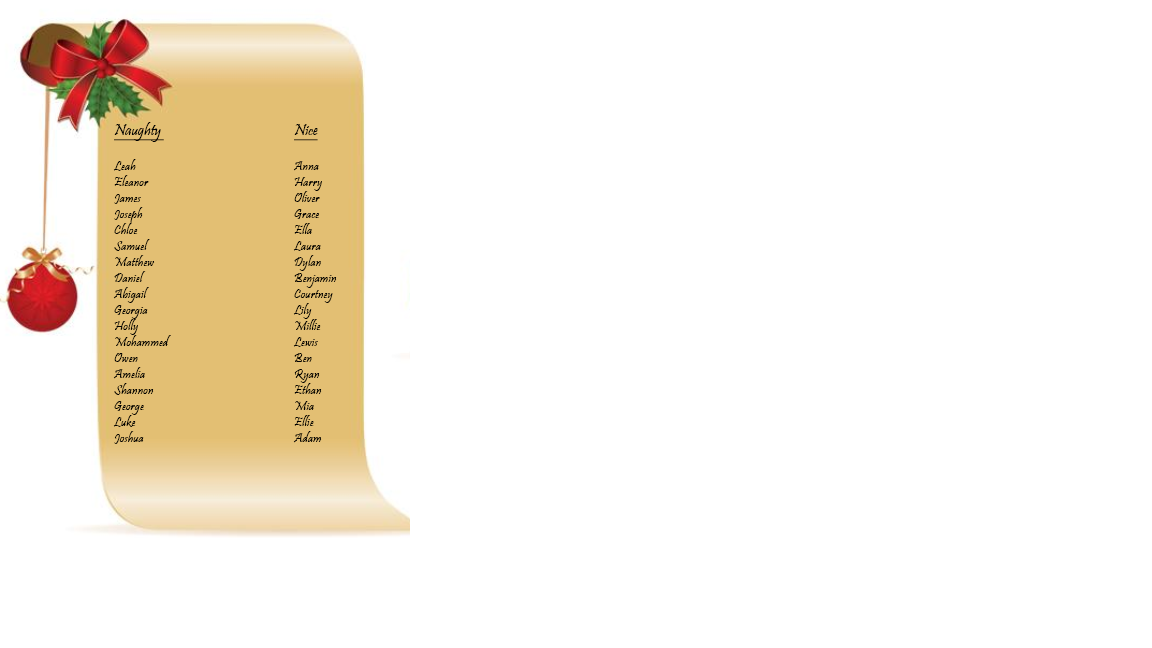
<style>
.page{position:relative;width:1152px;height:648px;background:#ffffff}
.page>*{position:absolute;margin:0}
.t1{font:13.3px "Pristina-Regular";color:#000000}
.t2{font:12px "Pristina-Regular";color:#000000;text-decoration:underline}
</style>
<div class="page">
<p class="t1" style="left:113px;top:122px;width:224px;height:322px"><span class="t2">Naughty                                Nice<br><br></span>Leah           Anna<br>Eleanor          Harry<br>James          Oliver<br>Joseph          Grace<br>Chloe          Ella<br>Samuel           Laura<br>Matthew         Dylan<br>Daniel          Benjamin<br>Abigail          Courtney<br>Georgia          Lily<br>Holly          Millie<br>Mohammed         Lewis<br>Owen          Ben<br>Amelia          Ryan<br>Shannon         Ethan<br>George           Mia<br>Luke          Ellie<br>Joshua          Adam</p>
</div>
